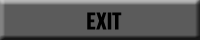
<style>
.page{position:relative;width:200px;height:40px;background:#5b5b5b}
.page>*{position:absolute;margin:0}
.t1{font:24px "BebasNeue";color:#000000;font-weight:bold}
</style>
<div class="page">
<p class="t1" style="left:87px;top:12px;width:35px;height:18px">exit</p>
</div>
